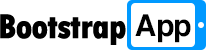
<style>
.page{position:relative;width:206px;height:50px;background:#ffffff}
.page>*{position:absolute;margin:0}
.t1{font:36px "TwCenMT-CondensedExtraBold";letter-spacing:-0.04em;color:#000000;font-weight:bold}
</style>
<div class="page">
<p class="t1" style="left:0px;top:14px;width:126px;height:31px">Bootstrap</p>
</div>
